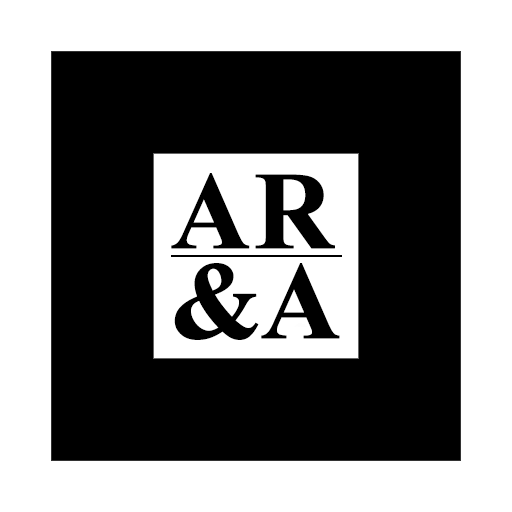
<style>
.page{position:relative;width:512px;height:512px;background:#000000}
.page>*{position:absolute;margin:0}
.t1{font:110px/90px "TimesNewRomanPS-BoldMT";color:#000000;font-weight:bold}
</style>
<div class="page">
<p class="t1" style="left:171px;top:173px;width:169px;height:167px">AR<br>&amp;A</p>
</div>
